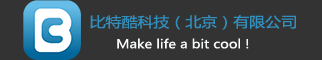
<style>
.page{position:relative;width:322px;height:60px;background:#333333}
.page>*{position:absolute;margin:0}
.t1{font:14px "MicrosoftYaHei";color:#3190be;scale:1.14 1}
.t2{font:12px "MicrosoftYaHei";color:#f9fafa;scale:1.14 1}
</style>
<div class="page">
<p class="t1" style="left:90px;top:15px;width:206px;height:15px">比特酷科技（北京）有限公司</p>
<p class="t2" style="left:117px;top:38px;width:132px;height:11px">Make life a bit cool !</p>
</div>
